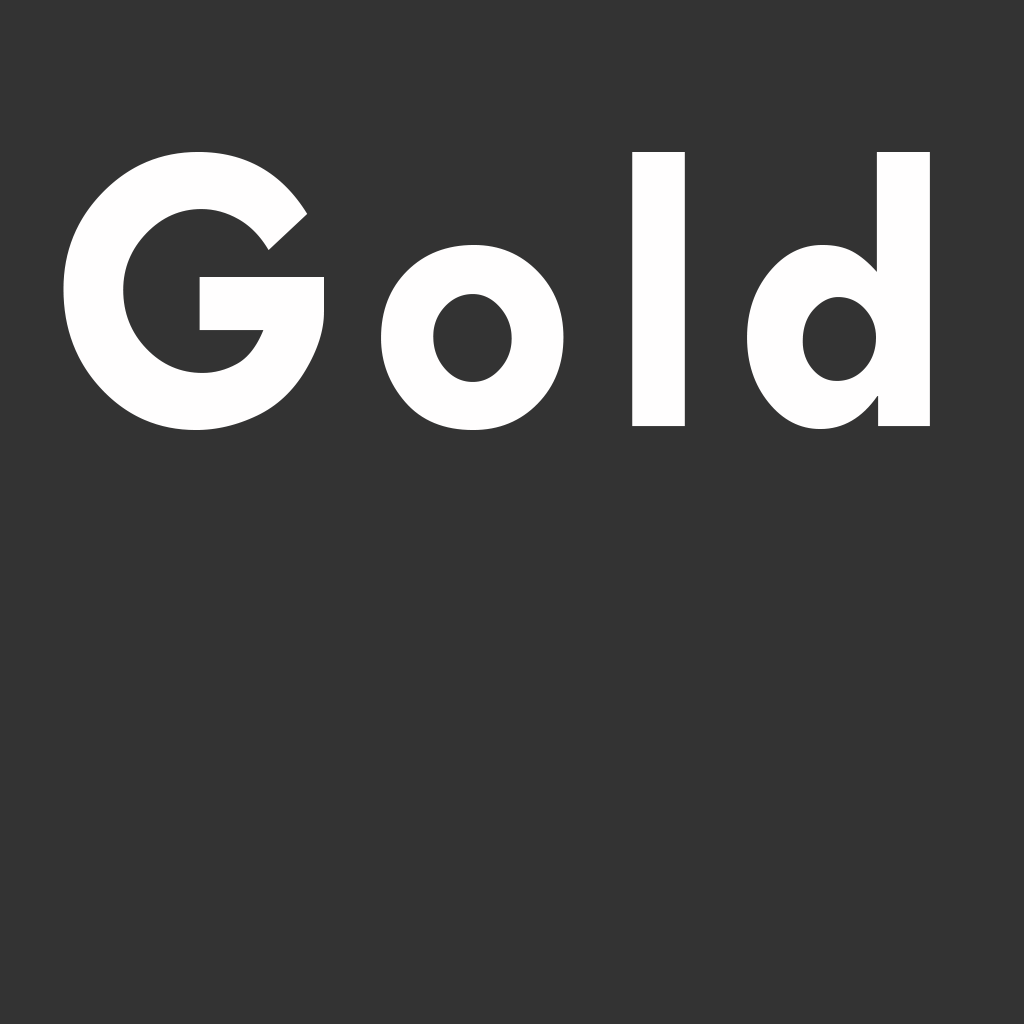
<style>
.page{position:relative;width:1024px;height:1024px;background:#333333}
.page>*{position:absolute;margin:0}
.t1{font:420px "TwCenMT-Bold";letter-spacing:0.05em;color:#fffefe}
</style>
<div class="page">
<p class="t1" style="left:63px;top:152px;width:867px;height:278px">Gold</p>
</div>
